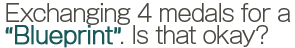
<style>
.page{position:relative;width:295px;height:48px;background:#ffffff}
.page>*{position:absolute;margin:0}
.t1{font:23px/22px "GothicMB101Pro-Light";letter-spacing:-0.04em;color:#4d4944}
.t2{font:23px/22px "AdobeClean-Regular";letter-spacing:-0.04em;color:#18595a;font-weight:bold}
.t3{font:23px/22px "GothicMB101Pro-Light";letter-spacing:-0.04em;color:#18595a;font-weight:bold}
</style>
<div class="page">
<p class="t1" style="left:5px;top:3px;width:286px;height:45px">Exchanging 4 medals for a<br><span class="t2">“</span><span class="t3">Blueprint</span><span class="t2">”</span>. Is that okay?</p>
</div>
